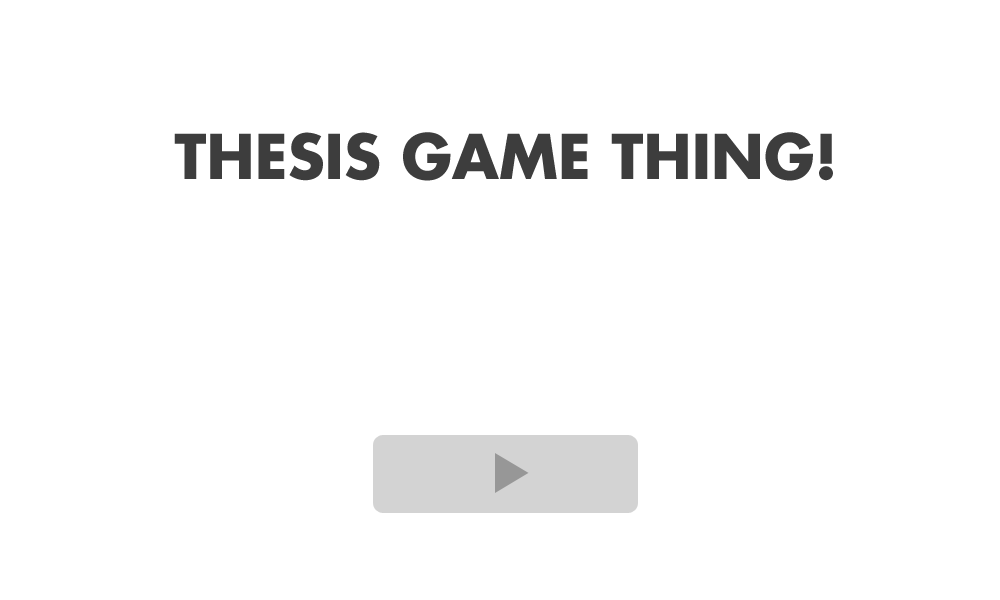
<style>
.page{position:relative;width:1000px;height:600px;background:#ffffff}
.page>*{position:absolute;margin:0}
.t1{font:60px "FuturaStd-Bold";color:#3d3d3d}
</style>
<div class="page">
<p class="t1" style="left:174px;top:132px;width:659px;height:49px">THESIS GAME THING!</p>
</div>
